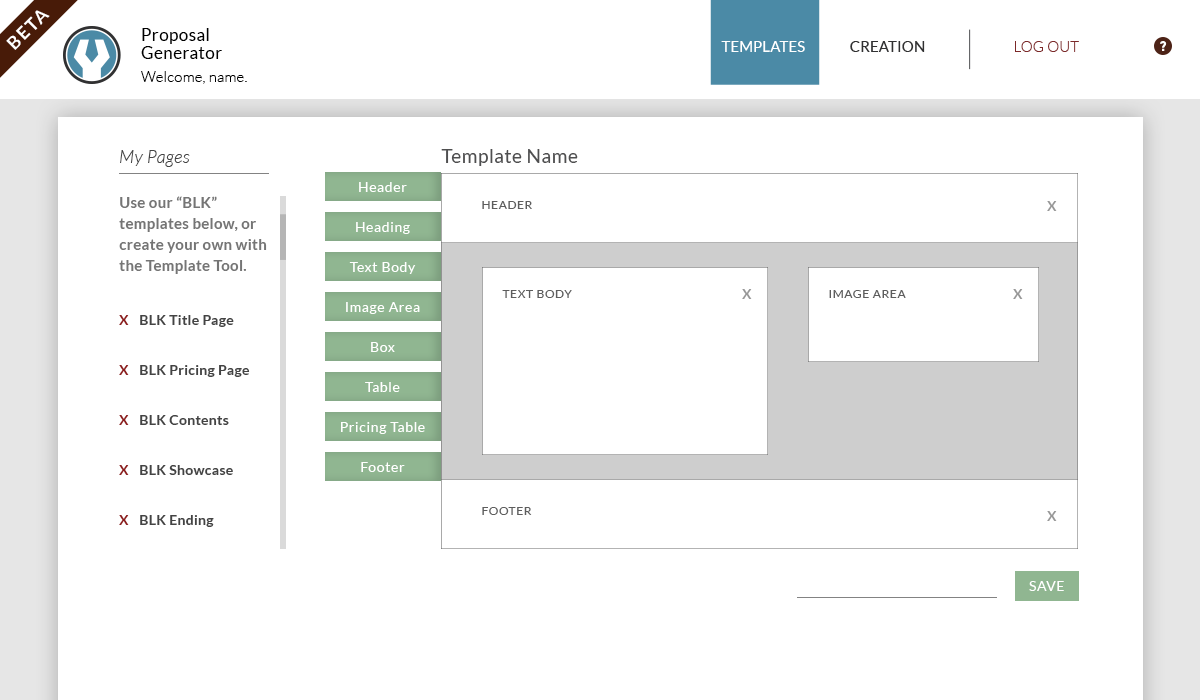
<style>
.page{position:relative;width:1200px;height:700px;background:#ffffff}
.page>*{position:absolute;margin:0}
.t1{font:18.1px "Lato-Bold";letter-spacing:0.1em;color:#ffffff}
.t2{font:17.2px/18.4px "Lato-Regular";letter-spacing:0.02em;color:#000000}
.t3{font:14.7px/23.3px "Lato-Light";letter-spacing:0.02em;color:#000000}
.t4{font:14.7px "Lato-Regular";letter-spacing:0.02em;color:#ffffff}
.t5{font:14.7px "Lato-Regular";letter-spacing:0.02em;color:#313132}
.t6{font:14.7px "Lato-Light";letter-spacing:0.02em;color:#7c2929}
.t7{font:14px "DINPro-Black";letter-spacing:0.02em;color:#ffffff}
.t8{font:18px "Lato-LightItalic";letter-spacing:0.02em;color:#434343}
.t9{font:19.3px "Lato-Regular";letter-spacing:0.02em;color:#4f4f50}
.t10{font:13.8px "Lato-Regular";letter-spacing:0.05em;color:#ffffff}
.t11{font:15px/21px "Lato-Bold";letter-spacing:0.02em;color:#757575}
.t12{font:12px "Lato-Regular";letter-spacing:0.05em;color:#5d5d5d}
.t13{font:14px "Lato-Bold";letter-spacing:0.02em;color:#979797}
.t14{font:14px "Lato-Bold";letter-spacing:0.02em;color:#8b1c1c}
.t15{font:14px "Lato-Bold";letter-spacing:0.02em;color:#434343}
</style>
<div class="page">
<p class="t1" style="left:6px;top:10px;width:44px;height:40px;rotate:-45deg">BETA</p>
<p class="t2" style="left:141px;top:28px;width:106px;height:56px">Proposal<br>Generator<br><span class="t3">Welcome, name.</span></p>
<p class="t4" style="left:721px;top:41px;width:84px;height:11px">TEMPLATES</p>
<p class="t5" style="left:850px;top:41px;width:75px;height:11px">CREATION</p>
<p class="t6" style="left:1015px;top:41px;width:64px;height:11px">LOG OUT</p>
<p class="t7" style="left:1160px;top:41px;width:7px;height:10px">?</p>
<p class="t8" style="left:120px;top:150px;width:70px;height:17px">My Pages</p>
<p class="t9" style="left:441px;top:149px;width:137px;height:17px">Template Name</p>
<p class="t10" style="left:359px;top:182px;width:48px;height:10px">Header</p>
<p class="t11" style="left:119px;top:196px;width:148px;height:78px">Use our “BLK” templates below, or create your own with the Template Tool.</p>
<p class="t12" style="left:482px;top:201px;width:50px;height:8px">HEADER</p>
<p class="t13" style="left:1047px;top:201px;width:10px;height:10px">X</p>
<p class="t10" style="left:356px;top:222px;width:54px;height:12px">Heading</p>
<p class="t10" style="left:349px;top:262px;width:67px;height:12px">Text Body</p>
<p class="t12" style="left:502px;top:290px;width:70px;height:8px">TEXT BODY</p>
<p class="t13" style="left:742px;top:289px;width:10px;height:10px">X</p>
<p class="t12" style="left:829px;top:290px;width:77px;height:8px">IMAGE AREA</p>
<p class="t13" style="left:1013px;top:289px;width:10px;height:10px">X</p>
<p class="t10" style="left:346px;top:302px;width:74px;height:12px">Image Area</p>
<p class="t14" style="left:119px;top:315px;width:10px;height:10px">X</p>
<p class="t15" style="left:140px;top:315px;width:94px;height:12px">BLK Title Page</p>
<p class="t10" style="left:371px;top:342px;width:24px;height:10px">Box</p>
<p class="t14" style="left:119px;top:365px;width:10px;height:10px">X</p>
<p class="t15" style="left:140px;top:365px;width:110px;height:12px">BLK Pricing Page</p>
<p class="t10" style="left:365px;top:382px;width:35px;height:10px">Table</p>
<p class="t14" style="left:119px;top:415px;width:10px;height:10px">X</p>
<p class="t15" style="left:140px;top:415px;width:89px;height:10px">BLK Contents</p>
<p class="t10" style="left:341px;top:422px;width:84px;height:12px">Pricing Table</p>
<p class="t10" style="left:361px;top:462px;width:44px;height:10px">Footer</p>
<p class="t14" style="left:119px;top:465px;width:10px;height:10px">X</p>
<p class="t15" style="left:140px;top:465px;width:93px;height:10px">BLK Showcase</p>
<p class="t12" style="left:482px;top:507px;width:50px;height:8px">FOOTER</p>
<p class="t14" style="left:119px;top:515px;width:10px;height:10px">X</p>
<p class="t15" style="left:140px;top:515px;width:74px;height:12px">BLK Ending</p>
<p class="t13" style="left:1047px;top:511px;width:10px;height:10px">X</p>
<p class="t10" style="left:1029px;top:581px;width:35px;height:10px">SAVE</p>
</div>
